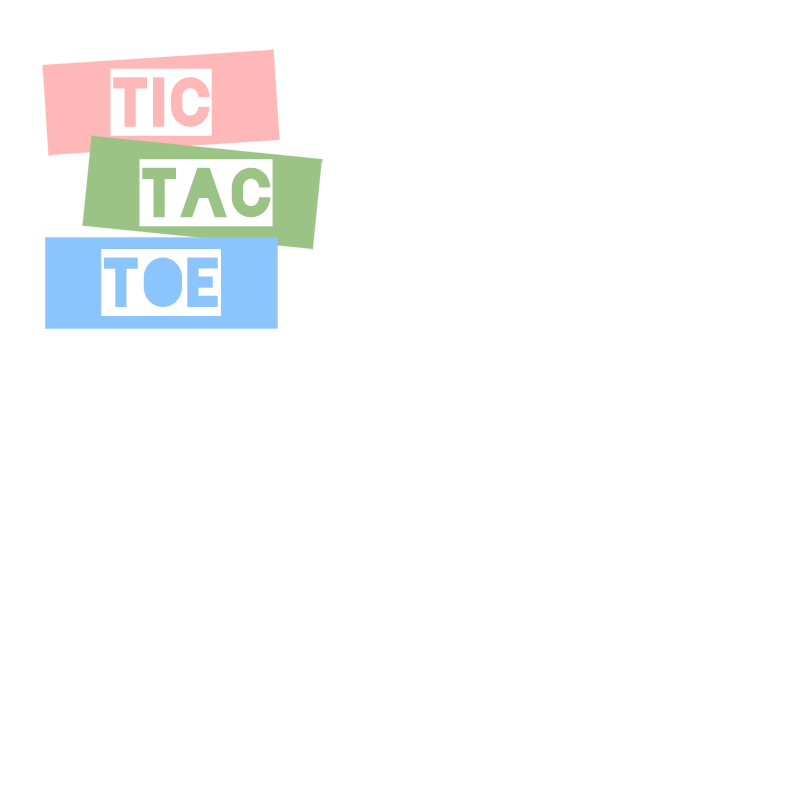
<style>
.page{position:relative;width:800px;height:800px;background:#ffffff}
.page>*{position:absolute;margin:0}
.t1{font:80px "Blackout-2AM";letter-spacing:0.01em;color:#ffffff}
</style>
<div class="page">
<p class="t1" style="left:110px;top:68px;width:102px;height:68px">tic</p>
<p class="t1" style="left:139px;top:159px;width:134px;height:68px">tac</p>
<p class="t1" style="left:101px;top:249px;width:120px;height:67px">toe</p>
</div>
